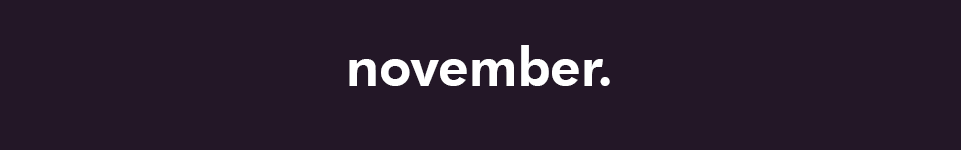
<style>
.page{position:relative;width:961px;height:150px;background:#231727}
.page>*{position:absolute;margin:0}
.t1{font:53.4px "FuturaBT-Heavy";color:#ffffff}
</style>
<div class="page">
<p class="t1" style="left:349px;top:45px;width:261px;height:41px">november.</p>
</div>
